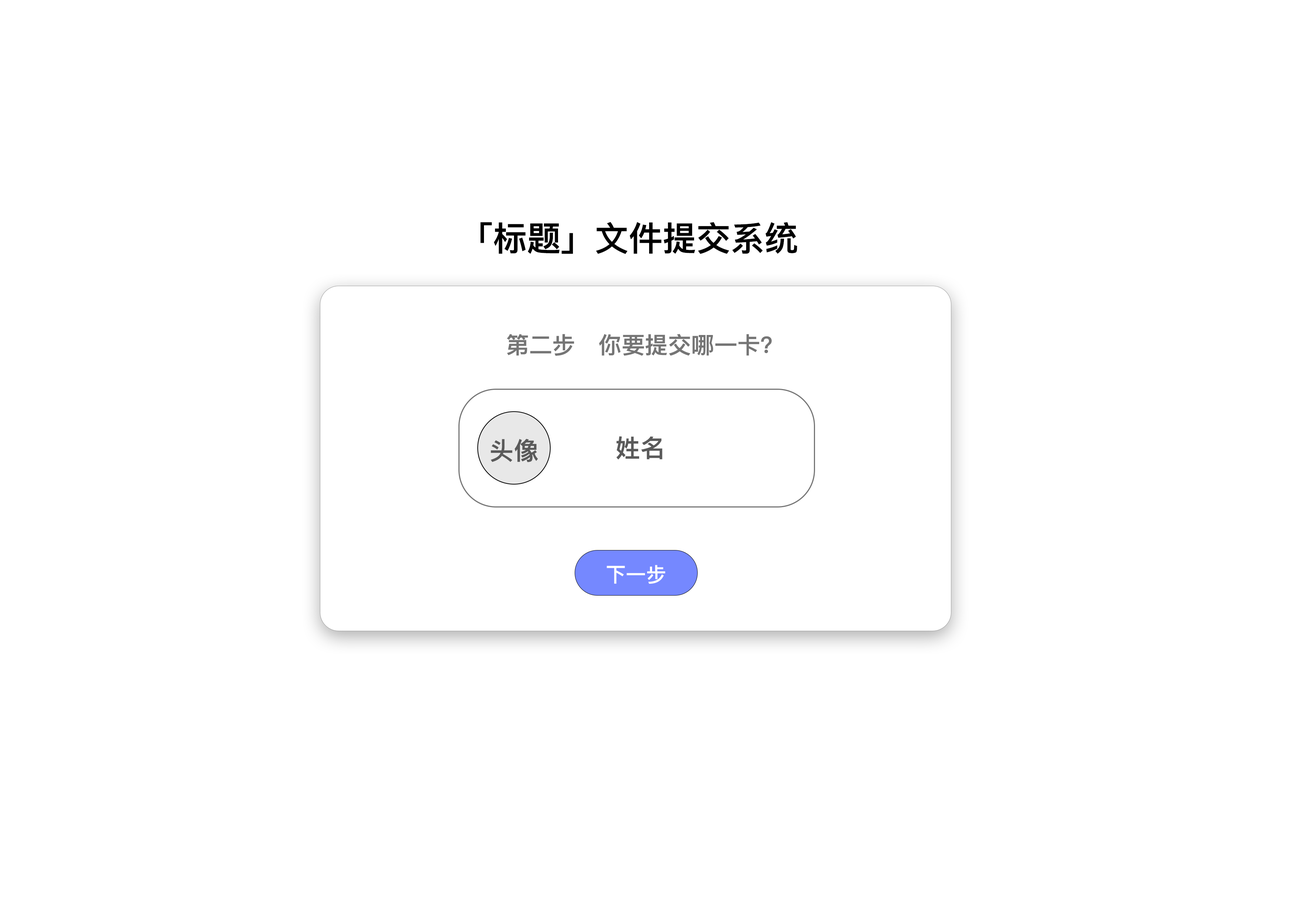
<style>
.page{position:relative;width:1299px;height:918px;background:#ffffff}
.page>*{position:absolute;margin:0}
.t1{font:33.9px "PingFangSC-Semibold";color:#000000}
.t2{font:23.1px "PingFangSC-Semibold";color:#757575}
.t3{font:24.7px "PingFangSC-Semibold";color:#5a5a5a}
.t4{font:20.1px "PingFangSC-Semibold";color:#ffffff}
</style>
<div class="page">
<p class="t1" style="left:480px;top:222px;width:317px;height:32px">「标题」文件提交系统</p>
<p class="t2" style="left:507px;top:334px;width:265px;height:22px">第二步   你要提交哪一卡？</p>
<p class="t3" style="left:616px;top:436px;width:46px;height:24px">姓名</p>
<p class="t3" style="left:491px;top:439px;width:47px;height:23px">头像</p>
<p class="t4" style="left:606px;top:565px;width:59px;height:19px">下一步</p>
</div>
